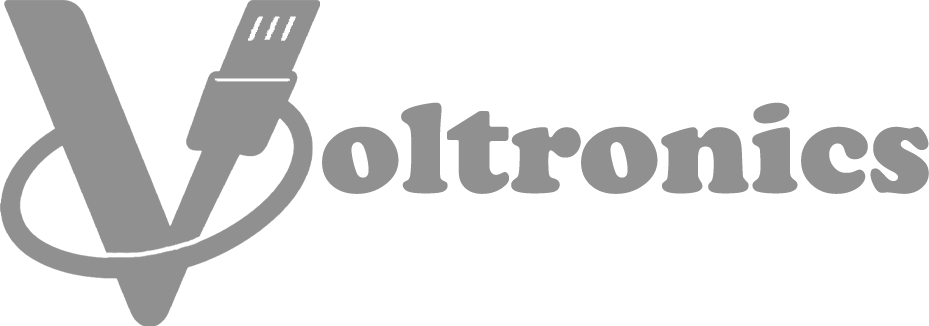
<style>
.page{position:relative;width:929px;height:326px;background:#ffffff}
.page>*{position:absolute;margin:0}
.t1{font:133.8px "CooperBlack";color:#909090}
</style>
<div class="page">
<p class="t1" style="left:322px;top:102px;width:607px;height:92px">oltronics</p>
</div>
